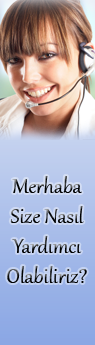
<style>
.page{position:relative;width:95px;height:345px}
.page>*{position:absolute;margin:0}
.t1{font:25px "Gabriola"}
</style>
<div class="page">
<p class="t1" style="left:7px;top:176px;width:80px;height:107px;text-align:center">Merhaba<br>Size Nasıl <br>Yardımcı <br>Olabiliriz?</p>
</div>
